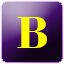
<style>
.page{position:relative;width:64px;height:64px}
.page>*{position:absolute;margin:0}
.t1{font:48px "BodoniBT-Bold";color:#ffff00}
</style>
<div class="page">
<p class="t1" style="left:17px;top:17px;width:30px;height:31px">B</p>
</div>
